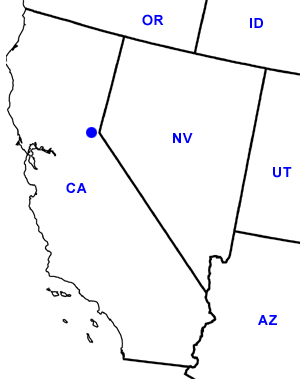
<style>
.page{position:relative;width:300px;height:379px;background:#ffffff}
.page>*{position:absolute;margin:0}
.t1{font:14px "Arial-BoldMT";letter-spacing:0.05em;color:#0000ff}
</style>
<div class="page">
<p class="t1" style="left:142px;top:14px;width:22px;height:12px">OR</p>
<p class="t1" style="left:250px;top:18px;width:13px;height:10px">ID</p>
<p class="t1" style="left:173px;top:133px;width:20px;height:10px">NV</p>
<p class="t1" style="left:273px;top:167px;width:19px;height:11px">UT</p>
<p class="t1" style="left:66px;top:182px;width:21px;height:11px">CA</p>
<p class="t1" style="left:258px;top:315px;width:19px;height:10px">AZ</p>
</div>
